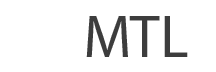
<style>
.page{position:relative;width:216px;height:72px;background:#ffffff}
.page>*{position:absolute;margin:0}
.t1{font:60px "MyriadPro-Regular";color:#3d3d3d}
.t2{font:60px "MyriadPro-Regular";color:#ffffff}
</style>
<div class="page">
<p class="t1" style="left:29px;top:16px;width:159px;height:41px"><span class="t2">SI </span>MTL</p>
</div>
